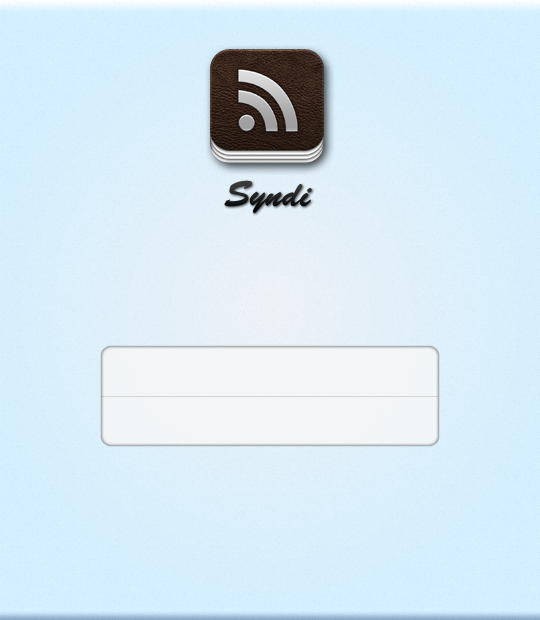
<style>
.page{position:relative;width:540px;height:620px}
.page>*{position:absolute;margin:0}
.t1{font:36px "BrushScriptStd";color:#1c1c1c}
</style>
<div class="page">
<p class="t1" style="left:224px;top:180px;width:88px;height:34px">Syndi</p>
</div>
